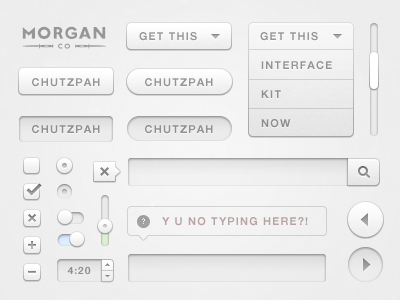
<style>
.page{position:relative;width:400px;height:300px}
.page>*{position:absolute;margin:0}
.t1{font:15.6px/14.2px "MorturaBold";letter-spacing:0.1em;color:#969696;text-transform:uppercase}
.t2{font:6.9px/14.2px "MorturaBold";letter-spacing:0.2em;color:#969696;text-transform:uppercase}
.t3{font:11px "HelveticaNeueLTPro-Bd";letter-spacing:0.1em;color:#969696;text-transform:uppercase}
.t4{font:11px "HelveticaNeueLTPro-Bd";letter-spacing:0.1em;color:#949494;text-transform:uppercase}
.t5{font:11px "HelveticaNeueLTPro-Bd";letter-spacing:0.1em;color:#959595;text-transform:uppercase}
.t6{font:11px "HelveticaNeueLTPro-Bd";letter-spacing:0.1em;color:#909090;text-transform:uppercase}
.t7{font:11px "HelveticaNeueLTPro-Bd";letter-spacing:0.1em;color:#8f8f8f;text-transform:uppercase}
.t8{font:11px "HelveticaNeueLTPro-Bd";letter-spacing:0.1em;color:#8d8d8d;text-transform:uppercase}
.t9{font:11px "HelveticaNeueLTPro-Bd";letter-spacing:0.1em;color:#b9a2a2;text-transform:uppercase}
.t10{font:10px "HelveticaNeueLTPro-Bd";letter-spacing:0.1em;color:#8d8d8d;text-transform:uppercase}
</style>
<div class="page">
<p class="t1" style="left:22px;top:26px;width:84px;height:23px;text-align:center">MORGAn<br><span class="t2">cO</span></p>
<p class="t3" style="left:139px;top:32px;width:58px;height:9px">get this</p>
<p class="t3" style="left:260px;top:32px;width:58px;height:9px">get this</p>
<p class="t4" style="left:261px;top:61px;width:71px;height:9px">interface</p>
<p class="t5" style="left:32px;top:78px;width:68px;height:9px">chutzpah</p>
<p class="t5" style="left:145px;top:78px;width:68px;height:9px">chutzpah</p>
<p class="t6" style="left:261px;top:90px;width:20px;height:8px">kit</p>
<p class="t7" style="left:32px;top:125px;width:68px;height:9px">chutzpah</p>
<p class="t7" style="left:145px;top:125px;width:68px;height:9px">chutzpah</p>
<p class="t8" style="left:261px;top:119px;width:30px;height:9px">now</p>
<p class="t9" style="left:162px;top:217px;width:146px;height:9px">y u no typing here?!</p>
<p class="t10" style="left:67px;top:266px;width:24px;height:9px">4:20</p>
</div>
